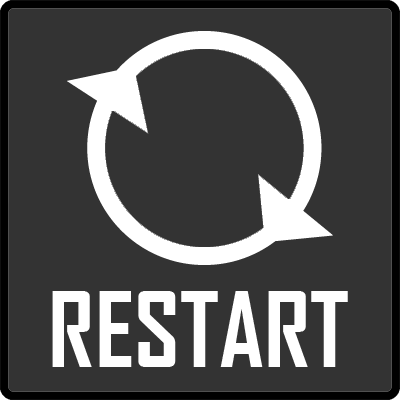
<style>
.page{position:relative;width:400px;height:400px;background:#333333}
.page>*{position:absolute;margin:0}
.t1{font:100px "AgencyFB-Bold";color:#ffffff}
</style>
<div class="page">
<p class="t1" style="left:52px;top:291px;width:296px;height:76px">RESTART</p>
</div>
